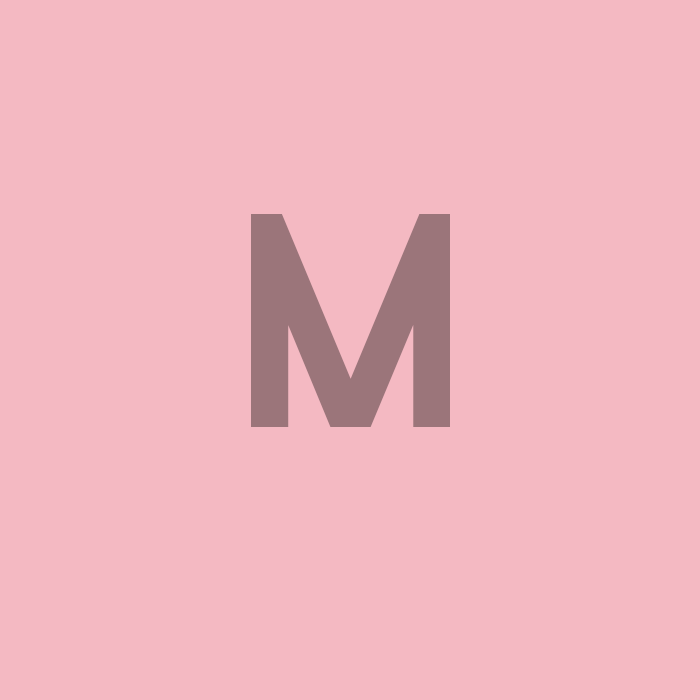
<style>
.page{position:relative;width:700px;height:700px;background:#f4b9c2}
.page>*{position:absolute;margin:0}
.t1{font:226.9px "digitalgeometric-Bold";color:#9b757a}
</style>
<div class="page">
<p class="t1" style="left:251px;top:214px;width:199px;height:213px">M</p>
</div>
